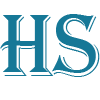
<style>
.page{position:relative;width:100px;height:100px;background:#ffffff}
.page>*{position:absolute;margin:0}
.t1{font:91.5px "Algerian";color:#167897;scale:0.92 1}
</style>
<div class="page">
<p class="t1" style="left:0px;top:14px;width:100px;height:63px">HS</p>
</div>
